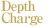
<style>
.page{position:relative;width:54px;height:27px;background:#ffffff}
.page>*{position:absolute;margin:0}
.t1{font:14px/12px "RyuminPro-ExBold";letter-spacing:-0.08em;color:#c4a956}
</style>
<div class="page">
<p class="t1" style="left:1px;top:0px;width:42px;height:26px">Depth<br>Charge</p>
</div>
